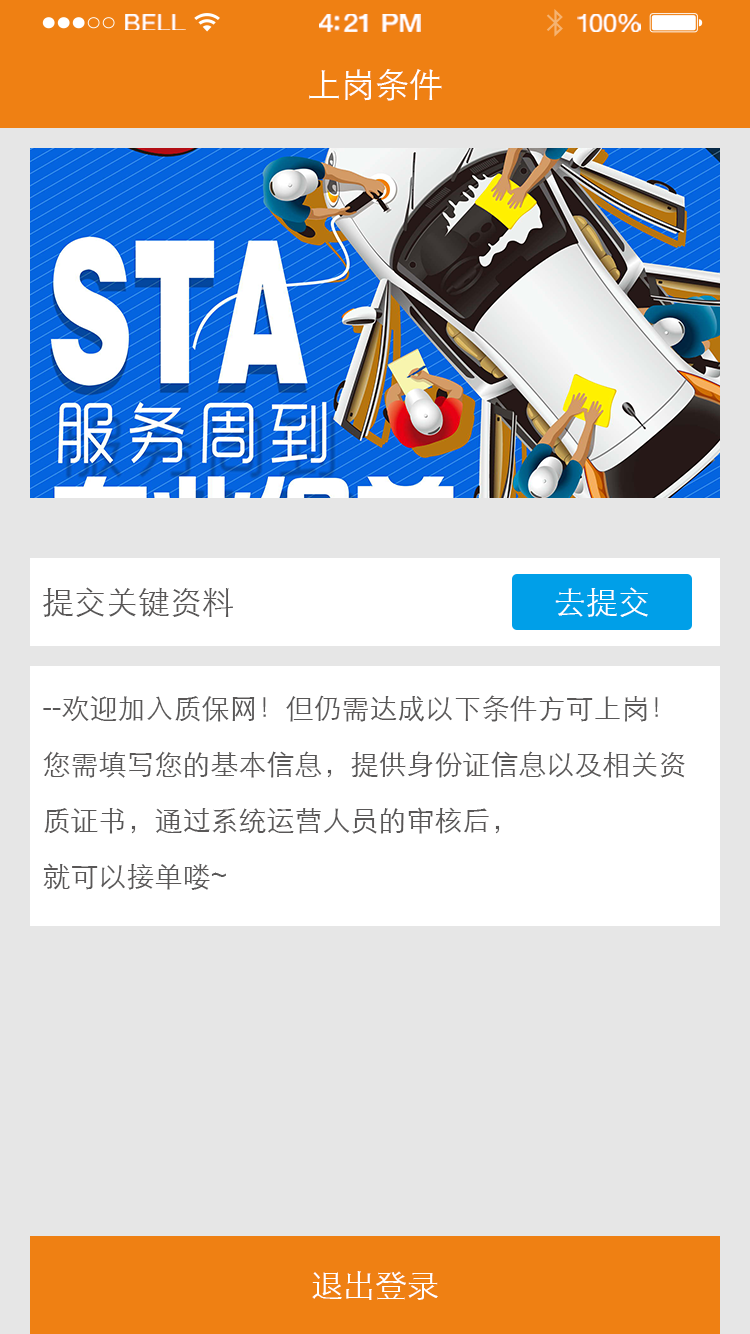
<style>
.page{position:relative;width:750px;height:1334px;background:#e6e6e6}
.page>*{position:absolute;margin:0}
.t1{font:23.3px "HelveticaNeue";letter-spacing:0.02em;color:#ffffff;scale:1.06 1}
.t2{font:25.3px "HelveticaNeue-Medium";letter-spacing:-0.02em;color:#ffffff;scale:1.06 1}
.t3{font:24.3px "HelveticaNeue";letter-spacing:-0.02em;color:#ffffff;scale:1.06 1}
.t4{font:34px "STXihei";color:#ffffff}
.t5{font:32px "STXihei";color:#595757}
.t6{font:32px "STXihei";color:#ffffff}
.t7{font:28px/56px "STXihei";color:#595757}
</style>
<div class="page">
<p class="t1" style="left:125px;top:14px;width:61px;height:16px">BELL</p>
<p class="t2" style="left:319px;top:14px;width:102px;height:18px">4:21 PM</p>
<p class="t3" style="left:577px;top:14px;width:64px;height:18px">100%</p>
<p class="t4" style="left:309px;top:69px;width:133px;height:32px">上岗条件</p>
<p class="t5" style="left:43px;top:587px;width:190px;height:30px">提交关键资料</p>
<p class="t6" style="left:555px;top:587px;width:93px;height:30px">去提交</p>
<p class="t7" style="left:43px;top:695px;width:642px;height:195px">--欢迎加入质保网！但仍需达成以下条件方可上岗！<br>您需填写您的基本信息，提供身份证信息以及相关资质证书，通过系统运营人员的审核后，<br>就可以接单喽~</p>
<p class="t6" style="left:312px;top:1271px;width:126px;height:29px">退出登录</p>
</div>
